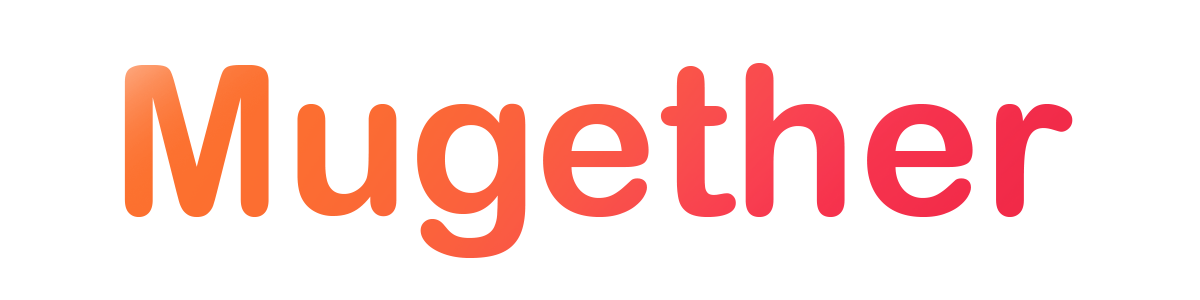
<style>
.page{position:relative;width:1200px;height:300px;background:#ffffff}
.page>*{position:absolute;margin:0}
.t1{font:208.3px "ArialRoundedMTBold"}
</style>
<div class="page">
<p class="t1" style="left:124px;top:63px;width:949px;height:195px">Mugether</p>
</div>
